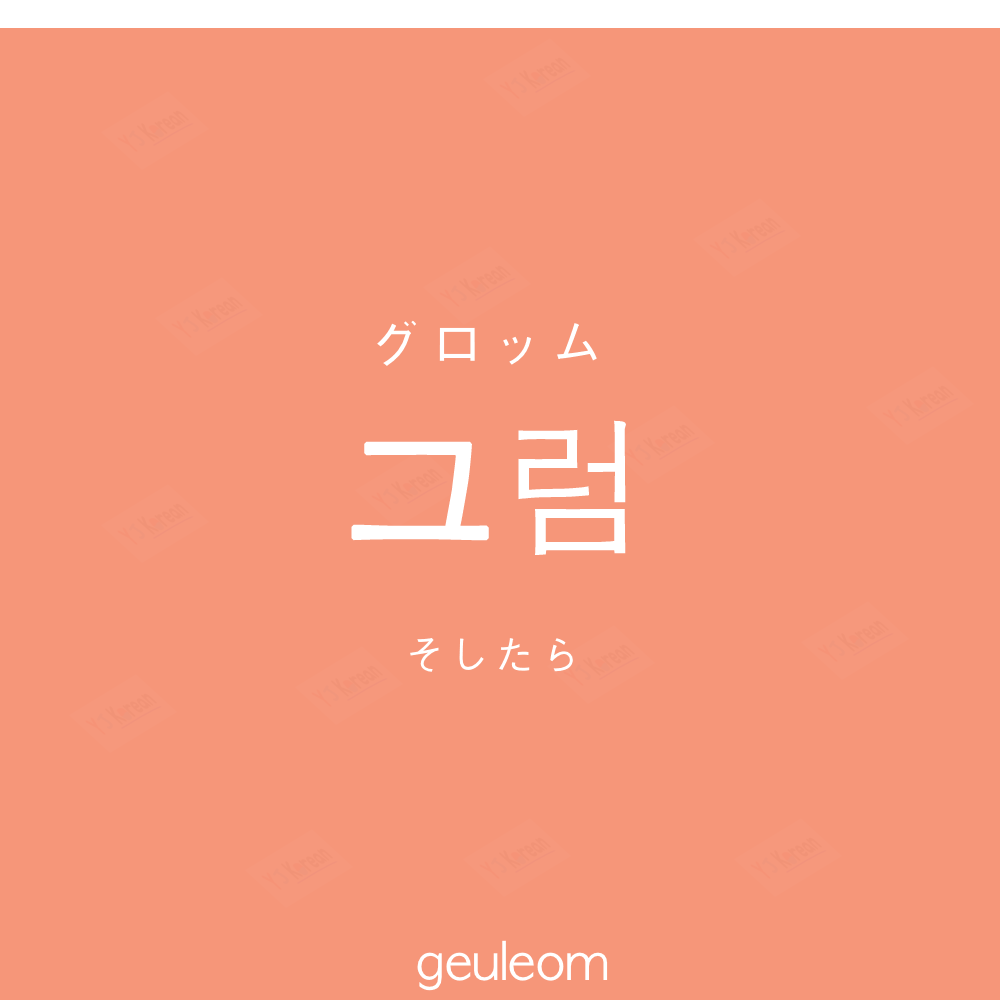
<style>
.page{position:relative;width:1000px;height:1000px;background:#f69679}
.page>*{position:absolute;margin:0}
.t1{font:60px "AppleGothic";color:#ffffff}
.t2{font:150px "AppleGothic";color:#ffffff;font-weight:bold}
.t3{font:45px "AppleGothic";color:#ffffff}
.t4{font:50px "AppleGothic";color:#ffffff}
</style>
<div class="page">
<p class="t1" style="left:377px;top:320px;width:220px;height:46px">グロッム</p>
<p class="t2" style="left:351px;top:420px;width:275px;height:135px">그럼</p>
<p class="t3" style="left:410px;top:638px;width:163px;height:34px">そしたら</p>
<p class="t4" style="left:417px;top:940px;width:191px;height:51px">geuleom</p>
</div>
